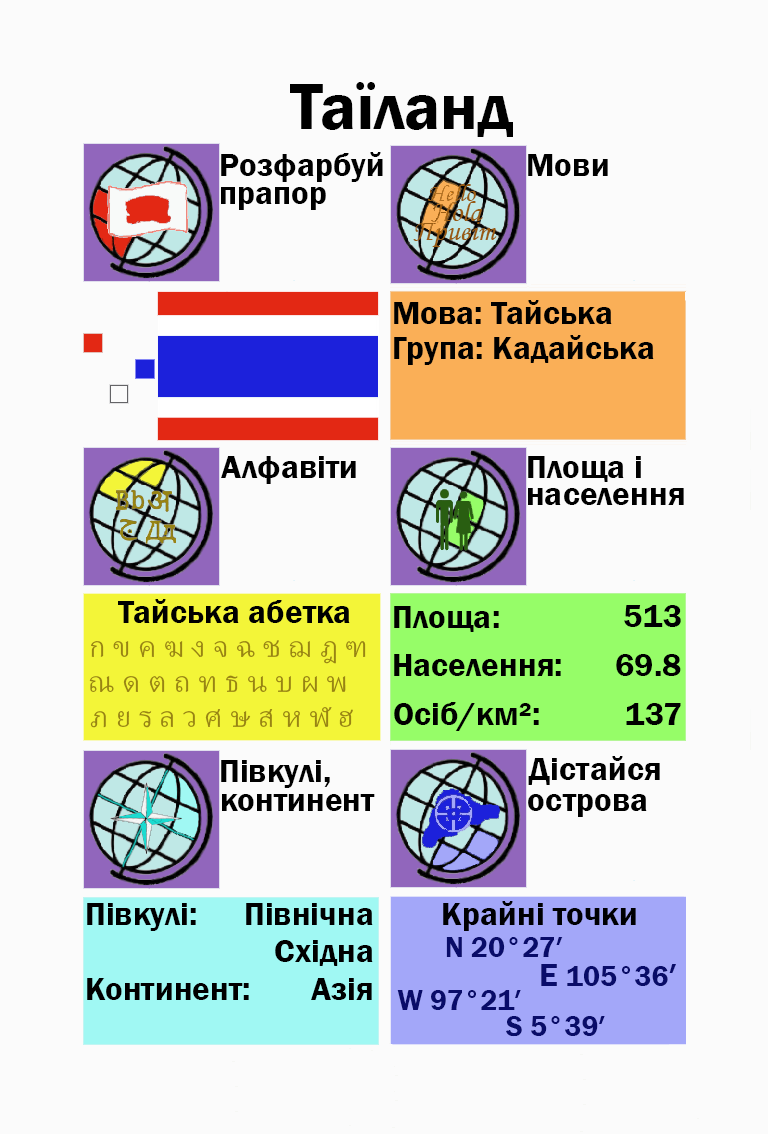
<style>
.page{position:relative;width:768px;height:1134px;background:#fbfbfb}
.page>*{position:absolute;margin:0}
.t1{font:66.7px "FranklinGothic-Demi";color:#000000}
.t2{font:33.3px "FranklinGothic-Demi";color:#000000}
.t3{font:33.3px "FranklinGothic-Demi";color:#000003}
.t4{font:37.5px "AdobeThai-Regular";color:#988413}
.t5{font:29.2px "FranklinGothic-Demi";color:#988413}
.t6{font:29.2px "FranklinGothic-Demi";color:#090c69}
.t7{font:33.3px "FranklinGothic-Demi";color:#090c69}
</style>
<div class="page">
<p class="t1" style="left:290px;top:82px;width:223px;height:55px">Таїланд</p>
<p class="t2" style="left:221px;top:152px;width:162px;height:30px">Розфарбуй</p>
<p class="t2" style="left:528px;top:154px;width:80px;height:22px">Мови</p>
<p class="t2" style="left:221px;top:187px;width:105px;height:23px">прапор</p>
<p class="t2" style="left:394px;top:300px;width:218px;height:24px">Мова: Тайська</p>
<p class="t2" style="left:394px;top:335px;width:260px;height:30px">Група: Кадайська</p>
<p class="t2" style="left:221px;top:456px;width:135px;height:28px">Алфавіти</p>
<p class="t2" style="left:528px;top:456px;width:113px;height:26px">Площа і</p>
<p class="t2" style="left:528px;top:488px;width:156px;height:17px">населення</p>
<p class="t2" style="left:118px;top:599px;width:232px;height:24px">Тайська абетка</p>
<p class="t2" style="left:394px;top:606px;width:105px;height:26px">Площа:</p>
<p class="t3" style="left:624px;top:605px;width:57px;height:22px">513</p>
<p class="t4" style="left:91px;top:640px;width:275px;height:24px"><span class="t5"><br></span>ก ข ค ฆ ง จ ฉ ช ฌ ฎ ฑ</p>
<p class="t2" style="left:394px;top:654px;width:167px;height:22px">Населення:</p>
<p class="t2" style="left:616px;top:654px;width:65px;height:22px">69.8</p>
<p class="t4" style="left:89px;top:675px;width:257px;height:18px">ณ ด ต ถ ท ธ น บ ผ พ</p>
<p class="t2" style="left:394px;top:702px;width:145px;height:29px">Осіб/км²:</p>
<p class="t4" style="left:90px;top:707px;width:263px;height:21px">ภ ย ร ล ว ศ ษ ส ห ฬ ฮ</p>
<p class="t2" style="left:626px;top:703px;width:55px;height:22px">137</p>
<p class="t2" style="left:221px;top:760px;width:109px;height:28px">Півкулі,</p>
<p class="t2" style="left:528px;top:756px;width:132px;height:29px">Дістайся</p>
<p class="t2" style="left:222px;top:794px;width:153px;height:17px">континент</p>
<p class="t2" style="left:528px;top:794px;width:119px;height:23px">острова</p>
<p class="t2" style="left:87px;top:903px;width:109px;height:28px">Півкулі:</p>
<p class="t2" style="left:246px;top:903px;width:127px;height:22px">Північна</p>
<p class="t3" style="left:443px;top:901px;width:193px;height:30px">Крайні точки</p>
<p class="t2" style="left:275px;top:940px;width:98px;height:26px">Східна</p>
<p class="t6" style="left:446px;top:937px;width:117px;height:20px">N 20°27′</p>
<p class="t6" style="left:541px;top:964px;width:135px;height:22px"><span class="t7">E </span>105°36<span class="t7">′</span></p>
<p class="t2" style="left:87px;top:978px;width:162px;height:22px">Континент:</p>
<p class="t2" style="left:311px;top:978px;width:61px;height:22px">Азія</p>
<p class="t6" style="left:397px;top:990px;width:124px;height:20px">W 97°21′</p>
<p class="t6" style="left:506px;top:1016px;width:99px;height:21px">S 5°39′</p>
</div>
